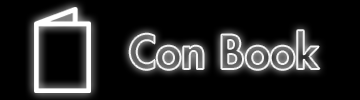
<style>
.page{position:relative;width:360px;height:100px;background:#000000}
.page>*{position:absolute;margin:0}
.t1{font:45.8px "FuturaStd-Heavy"}
</style>
<div class="page">
<p class="t1" style="left:129px;top:30px;width:191px;height:40px">Con Book</p>
</div>
